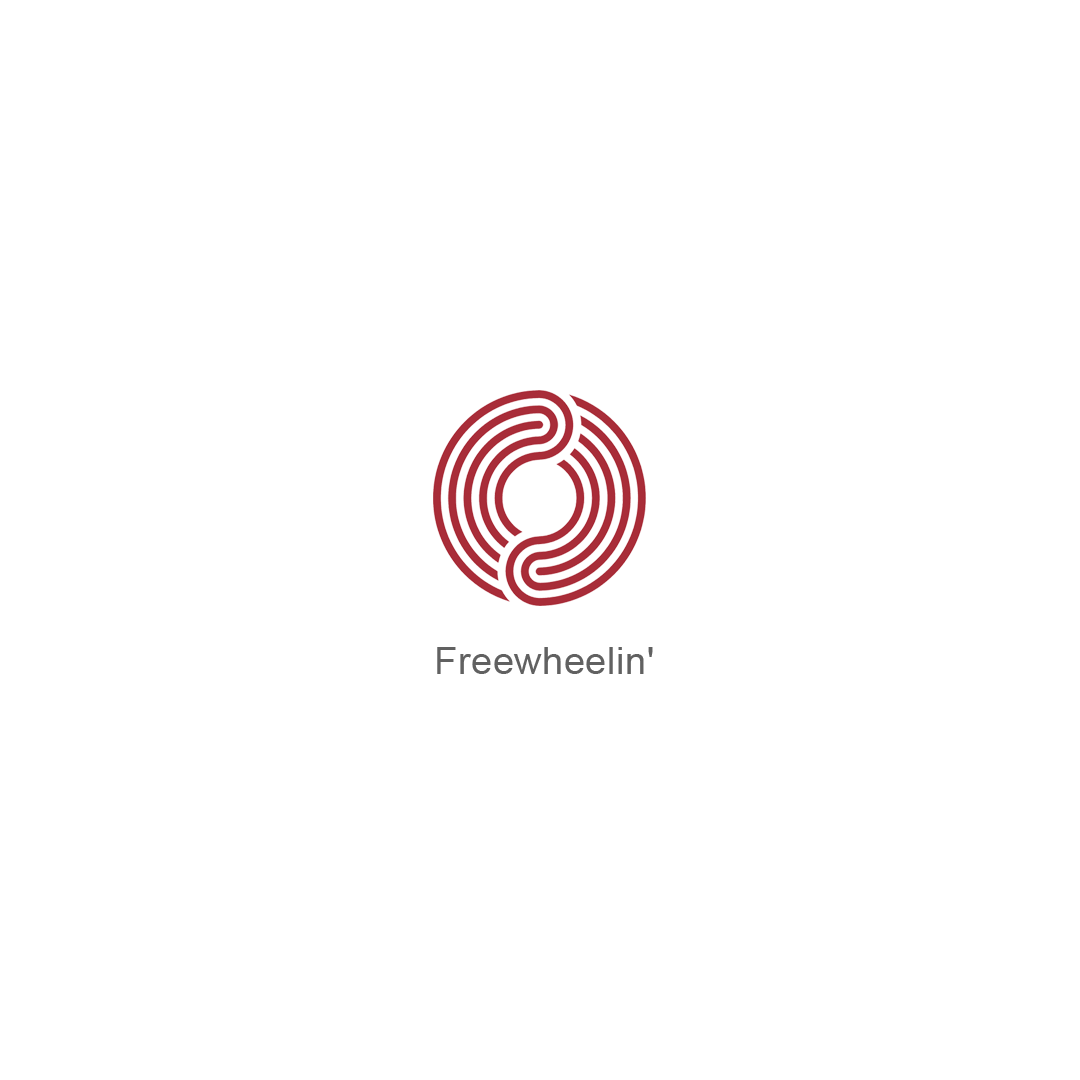
<style>
.page{position:relative;width:1080px;height:1080px;background:#ffffff}
.page>*{position:absolute;margin:0}
.t1{font:37.5px "ArialMT";letter-spacing:0.02em;color:#616161}
</style>
<div class="page">
<p class="t1" style="left:437px;top:647px;width:216px;height:27px">Freewheelin'</p>
</div>
